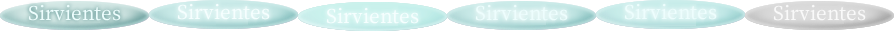
<style>
.page{position:relative;width:894px;height:31px;background:#ffffff}
.page>*{position:absolute;margin:0}
.t1{font:23px "OfficialFateFont-Medium";color:#edfdfd}
.t2{font:23px "OfficialFateFont-Medium";color:#f5fefe}
.t3{font:23px "OfficialFateFont-Medium";color:#f9f9f9}
</style>
<div class="page">
<p class="t1" style="left:28px;top:4px;width:93px;height:17px">Sirvientes</p>
<p class="t2" style="left:177px;top:3px;width:93px;height:17px">Sirvientes</p>
<p class="t1" style="left:475px;top:4px;width:93px;height:17px">Sirvientes</p>
<p class="t1" style="left:624px;top:3px;width:93px;height:17px">Sirvientes</p>
<p class="t3" style="left:773px;top:4px;width:93px;height:17px">Sirvientes</p>
<p class="t2" style="left:326px;top:7px;width:93px;height:17px">Sirvientes</p>
</div>
